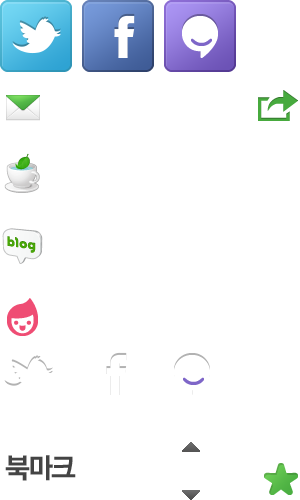
<style>
.page{position:relative;width:300px;height:500px;background:#ffffff}
.page>*{position:absolute;margin:0}
.t1{font:28px "YGO550";letter-spacing:-0.075em;color:#444444}
</style>
<div class="page">
<p class="t1" style="left:5px;top:455px;width:71px;height:26px">북마크</p>
</div>
